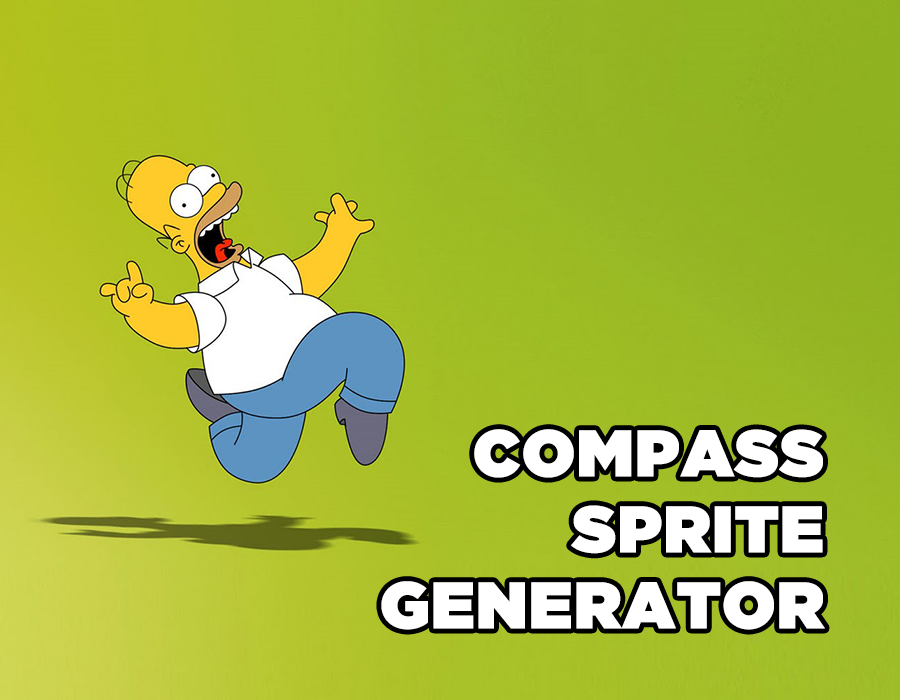
<style>
.page{position:relative;width:900px;height:700px}
.page>*{position:absolute;margin:0}
.t1{font:65.2px/75.9px "GothamUltra";color:#ffffff;font-weight:bold}
</style>
<div class="page">
<p class="t1" style="left:381px;top:429px;width:444px;height:201px;text-align:right">COMPASS<br>SPRITE<br>GENERATOR</p>
</div>
